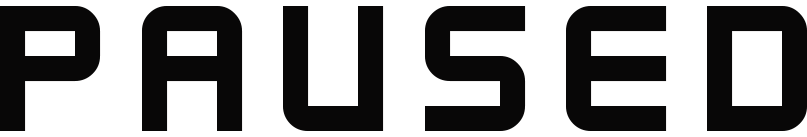
<style>
.page{position:relative;width:807px;height:137px;background:#ffffff}
.page>*{position:absolute;margin:0}
.t1{font:200px "KenVector-Future-Thin";color:#080707}
</style>
<div class="page">
<p class="t1" style="left:0px;top:6px;width:807px;height:125px">Paused</p>
</div>
